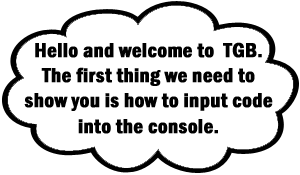
<style>
.page{position:relative;width:300px;height:175px;background:#ffffff}
.page>*{position:absolute;margin:0}
.t1{font:20.9px "FranklinGothic-DemiCond";color:#000000;font-weight:bold}
</style>
<div class="page">
<p class="t1" style="left:24px;top:42px;width:249px;height:92px;text-align:center">Hello and welcome to  TGB. <br>The first thing we need to <br>show you is how to input code into the console.</p>
</div>
